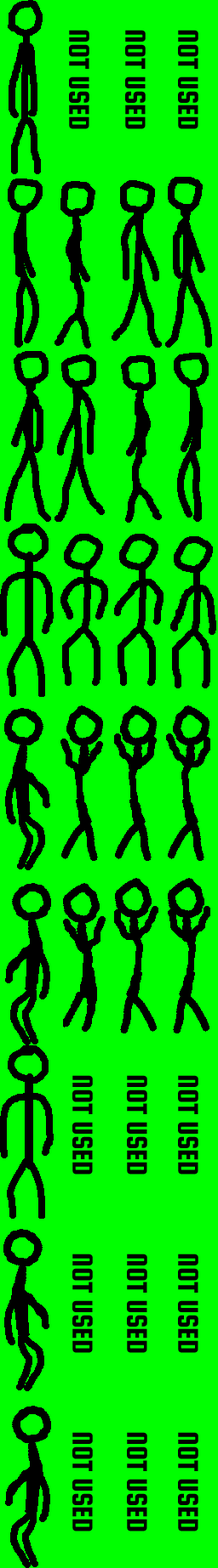
<style>
.page{position:relative;width:218px;height:1568px;background:#00ff00}
.page>*{position:absolute;margin:0}
.t1{font:30.6px "SquadaOne-Regular";color:#000000}
</style>
<div class="page">
<p class="t1" style="left:69px;top:30px;width:20px;height:99px;rotate:90deg">NOT USED</p>
<p class="t1" style="left:125px;top:30px;width:20px;height:99px;rotate:90deg">NOT USED</p>
<p class="t1" style="left:178px;top:30px;width:20px;height:99px;rotate:90deg">NOT USED</p>
<p class="t1" style="left:72px;top:1075px;width:21px;height:100px;rotate:90deg">NOT USED</p>
<p class="t1" style="left:127px;top:1075px;width:20px;height:100px;rotate:90deg">NOT USED</p>
<p class="t1" style="left:178px;top:1075px;width:20px;height:100px;rotate:90deg">NOT USED</p>
<p class="t1" style="left:72px;top:1254px;width:21px;height:99px;rotate:90deg">NOT USED</p>
<p class="t1" style="left:127px;top:1254px;width:20px;height:99px;rotate:90deg">NOT USED</p>
<p class="t1" style="left:178px;top:1254px;width:20px;height:99px;rotate:90deg">NOT USED</p>
<p class="t1" style="left:72px;top:1432px;width:21px;height:99px;rotate:90deg">NOT USED</p>
<p class="t1" style="left:127px;top:1432px;width:20px;height:99px;rotate:90deg">NOT USED</p>
<p class="t1" style="left:178px;top:1432px;width:20px;height:99px;rotate:90deg">NOT USED</p>
</div>
